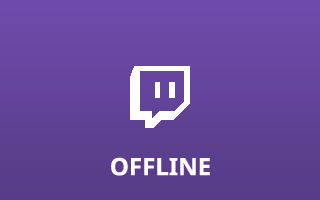
<style>
.page{position:relative;width:320px;height:200px}
.page>*{position:absolute;margin:0}
.t1{font:24px "NotoSans-Bold";color:#ffffff}
</style>
<div class="page">
<p class="t1" style="left:111px;top:157px;width:99px;height:19px">OFFLINE</p>
</div>
